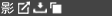
<style>
.page{position:relative;width:112px;height:16px;background:#444444}
.page>*{position:absolute;margin:0}
.t1{font:13.2px "HCP-Maru-Gothic";color:#ffffff}
</style>
<div class="page">
<p class="t1" style="left:1px;top:2px;width:13px;height:12px">影</p>
</div>
